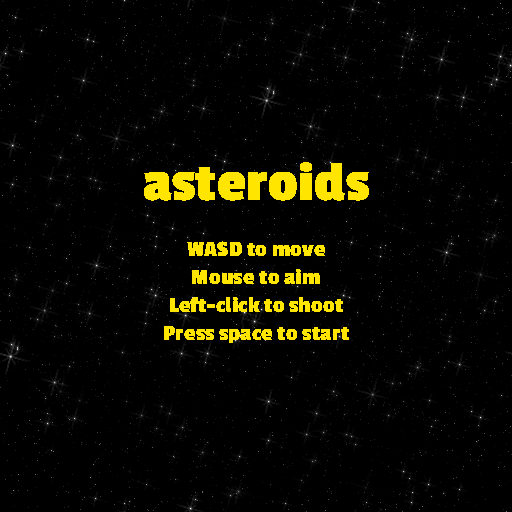
<style>
.page{position:relative;width:512px;height:512px;background:#000000}
.page>*{position:absolute;margin:0}
.t1{font:23.3px "PassionOne-Bold";color:#ffe500}
.t2{font:58.3px "PassionOne-Bold";color:#ffe500}
</style>
<div class="page">
<p class="t1" style="left:144px;top:162px;width:225px;height:181px;text-align:center"><span class="t2">asteroids<br></span><br>WASD to move<br>Mouse to aim<br>Left-click to shoot<br>Press space to start</p>
</div>
